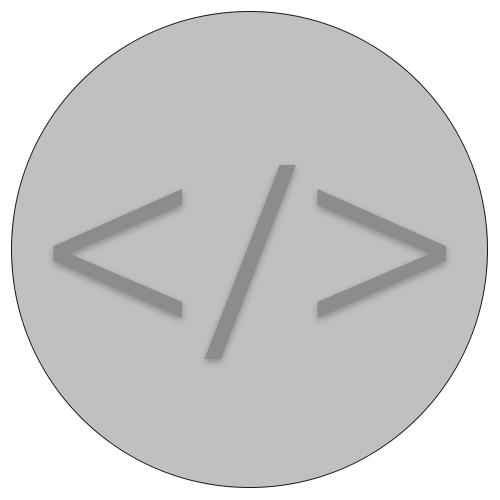
<style>
.page{position:relative;width:500px;height:500px;background:#c0c0c0}
.page>*{position:absolute;margin:0}
.t1{font:213.3px "CambriaMath";color:#8c8c8c}
</style>
<div class="page">
<p class="t1" style="left:53px;top:165px;width:394px;height:194px">&lt;/&gt;</p>
</div>
